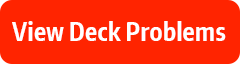
<style>
.page{position:relative;width:240px;height:64px;background:#ff2400}
.page>*{position:absolute;margin:0}
.t1{font:25px "EncodeSansCompressed-Bold";letter-spacing:0.015em;color:#ffffff}
</style>
<div class="page">
<p class="t1" style="left:12px;top:21px;width:214px;height:20px">View Deck Problems</p>
</div>
